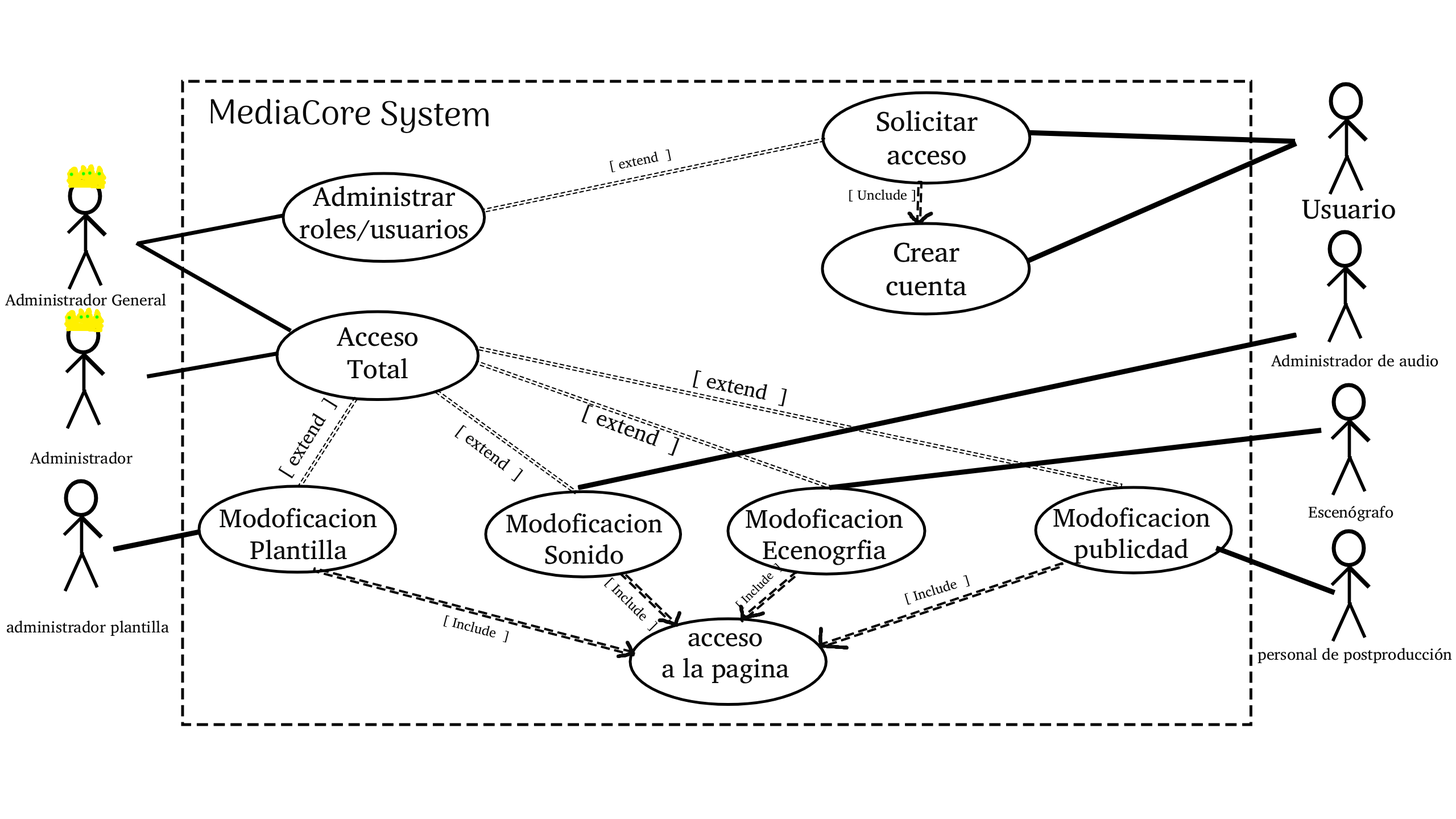
<style>
.page{position:relative;width:1456px;height:819px;background:#ffffff}
.page>*{position:absolute;margin:0}
.t1{font:34.1px "Arima-Regular";color:#0a0a0a}
.t2{font:27.7px "CharisSIL";color:#0a0a0a}
.t3{font:13.6px "CharisSIL";color:#0a0a0a}
.t4{font:26.9px "CharisSIL";color:#0a0a0a}
.t5{font:15.9px "CharisSIL";color:#0a0a0a}
.t6{font:20.9px "CharisSIL";color:#0a0a0a}
.t7{font:19.3px "CharisSIL";color:#0a0a0a}
.t8{font:22.1px "CharisSIL";color:#0a0a0a}
.t9{font:17.1px "CharisSIL";color:#0a0a0a}
.t10{font:26.3px "CharisSIL";color:#0a0a0a}
.t11{font:26.2px "CharisSIL";color:#0a0a0a}
.t12{font:26.1px "CharisSIL";color:#0a0a0a}
.t13{font:11.9px "CharisSIL";color:#0a0a0a}
</style>
<div class="page">
<p class="t1" style="left:210px;top:98px;width:279px;height:36px;rotate:1deg">MediaCore System</p>
<p class="t2" style="left:876px;top:110px;width:102px;height:55px;text-align:center">Solicitar<br>acceso</p>
<p class="t3" style="left:610px;top:149px;width:61px;height:24px;rotate:-11deg">[ extend  ]</p>
<p class="t4" style="left:300px;top:186px;width:168px;height:55px;text-align:center">Administrar<br>roles/usuarios</p>
<p class="t3" style="left:849px;top:189px;width:66px;height:13px">[ Unclude ]</p>
<p class="t2" style="left:1302px;top:198px;width:93px;height:21px">Usuario</p>
<p class="t2" style="left:886px;top:242px;width:80px;height:54px;text-align:center">Crear<br>cuenta</p>
<p class="t5" style="left:5px;top:293px;width:161px;height:13px">Administrador General</p>
<p class="t4" style="left:337px;top:327px;width:81px;height:52px;text-align:center">Acceso<br>Total</p>
<p class="t5" style="left:1271px;top:354px;width:167px;height:13px">Administrador de audio</p>
<p class="t6" style="left:693px;top:370px;width:94px;height:37px;rotate:12deg">[ extend  ]</p>
<p class="t7" style="left:278px;top:397px;width:60px;height:82px;rotate:-58deg">[ extend  ]</p>
<p class="t8" style="left:581px;top:404px;width:99px;height:52px;rotate:20deg">[ extend  ]</p>
<p class="t9" style="left:454px;top:424px;width:69px;height:58px;rotate:37deg">[ extend  ]</p>
<p class="t5" style="left:30px;top:452px;width:103px;height:12px">Administrador</p>
<p class="t10" style="left:220px;top:508px;width:157px;height:52px;text-align:center">Modoficacion<br>Plantilla</p>
<p class="t10" style="left:746px;top:508px;width:157px;height:57px;text-align:center">Modoficacion<br>Ecenogrfia</p>
<p class="t11" style="left:1053px;top:507px;width:157px;height:57px;text-align:center">Modoficacion<br>publicdad</p>
<p class="t5" style="left:1308px;top:506px;width:85px;height:16px">Escenógrafo</p>
<p class="t12" style="left:506px;top:513px;width:157px;height:51px;text-align:center">Modoficacion<br>Sonido</p>
<p class="t13" style="left:735px;top:562px;width:48px;height:48px;rotate:-45deg">[ Include  ]</p>
<p class="t3" style="left:603px;top:577px;width:55px;height:54px;rotate:45deg">[ Include  ]</p>
<p class="t3" style="left:904px;top:575px;width:66px;height:30px;rotate:-17deg">[ Include  ]</p>
<p class="t3" style="left:443px;top:615px;width:66px;height:28px;rotate:15deg">[ Include  ]</p>
<p class="t5" style="left:6px;top:620px;width:163px;height:16px">administrador plantilla</p>
<p class="t11" style="left:662px;top:633px;width:127px;height:51px;text-align:center">acceso<br>a la pagina</p>
<p class="t5" style="left:1257px;top:648px;width:195px;height:16px">personal de postproducción</p>
</div>
